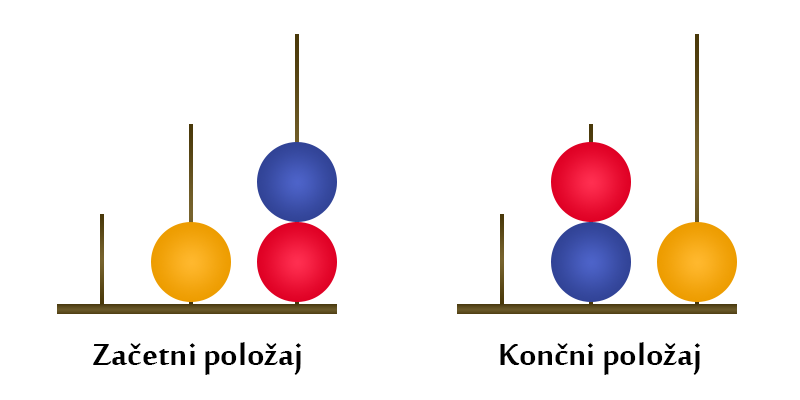
<style>
.page{position:relative;width:800px;height:400px;background:#ffffff}
.page>*{position:absolute;margin:0}
.t1{font:41.7px "SakkalMajallaBold";color:#000000}
</style>
<div class="page">
<p class="t1" style="left:93px;top:342px;width:208px;height:33px">Začetni položaj</p>
<p class="t1" style="left:500px;top:342px;width:200px;height:33px">Končni položaj</p>
</div>
